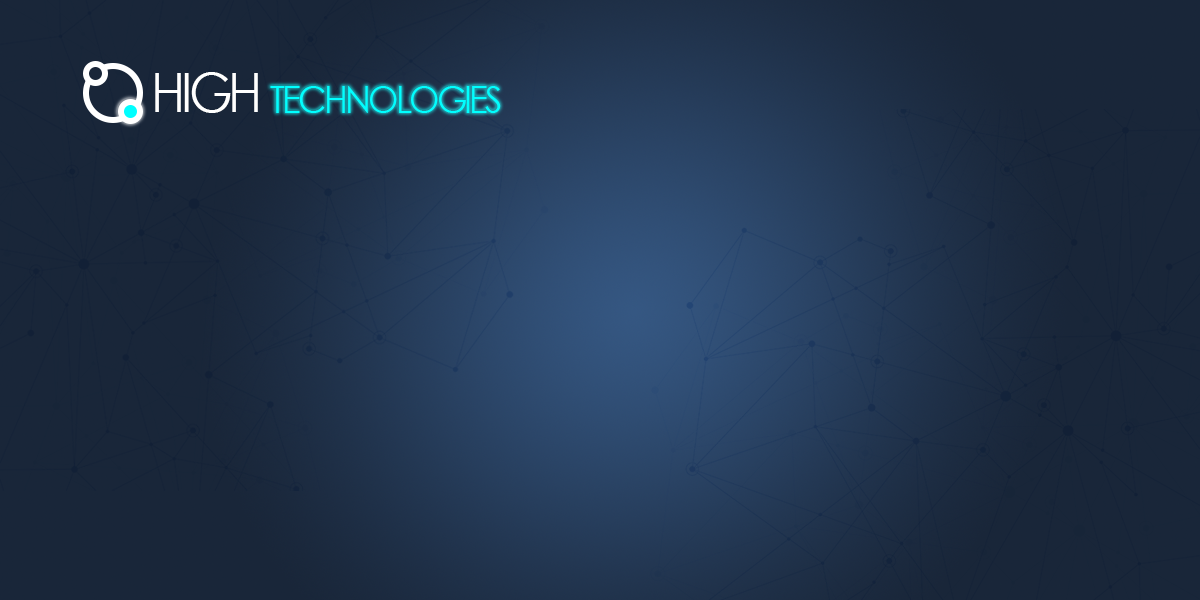
<style>
.page{position:relative;width:1200px;height:600px;background:#192639}
.page>*{position:absolute;margin:0}
.t1{font:54px "CenturyGothic";letter-spacing:-0.08em;color:#ffffff;scale:0.93 1}
.t2{font:37.8px "CenturyGothic";letter-spacing:-0.08em;color:#00ffff;scale:0.93 1}
</style>
<div class="page">
<p class="t1" style="left:155px;top:72px;width:103px;height:41px">HIGH</p>
<p class="t2" style="left:270px;top:86px;width:231px;height:27px">TECHNOLOGIES</p>
</div>
